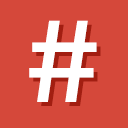
<style>
.page{position:relative;width:128px;height:128px;background:#d5483a}
.page>*{position:absolute;margin:0}
.t1{font:125px "SourceSansPro-Semibold";color:#ffffff;scale:1.2 1}
</style>
<div class="page">
<p class="t1" style="left:29px;top:20px;width:68px;height:82px">#</p>
</div>
